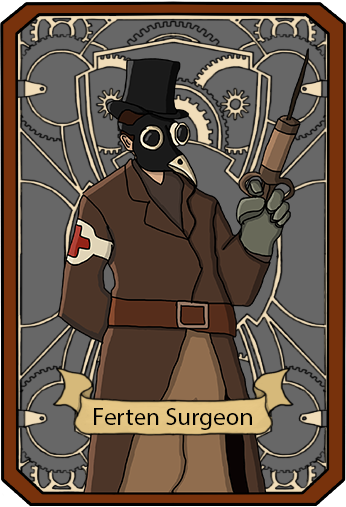
<style>
.page{position:relative;width:346px;height:507px;background:#676767}
.page>*{position:absolute;margin:0}
.t1{font:25px "MyriadPro-Regular";color:#000000}
</style>
<div class="page">
<p class="t1" style="left:94px;top:408px;width:158px;height:22px">Ferten Surgeon</p>
</div>
